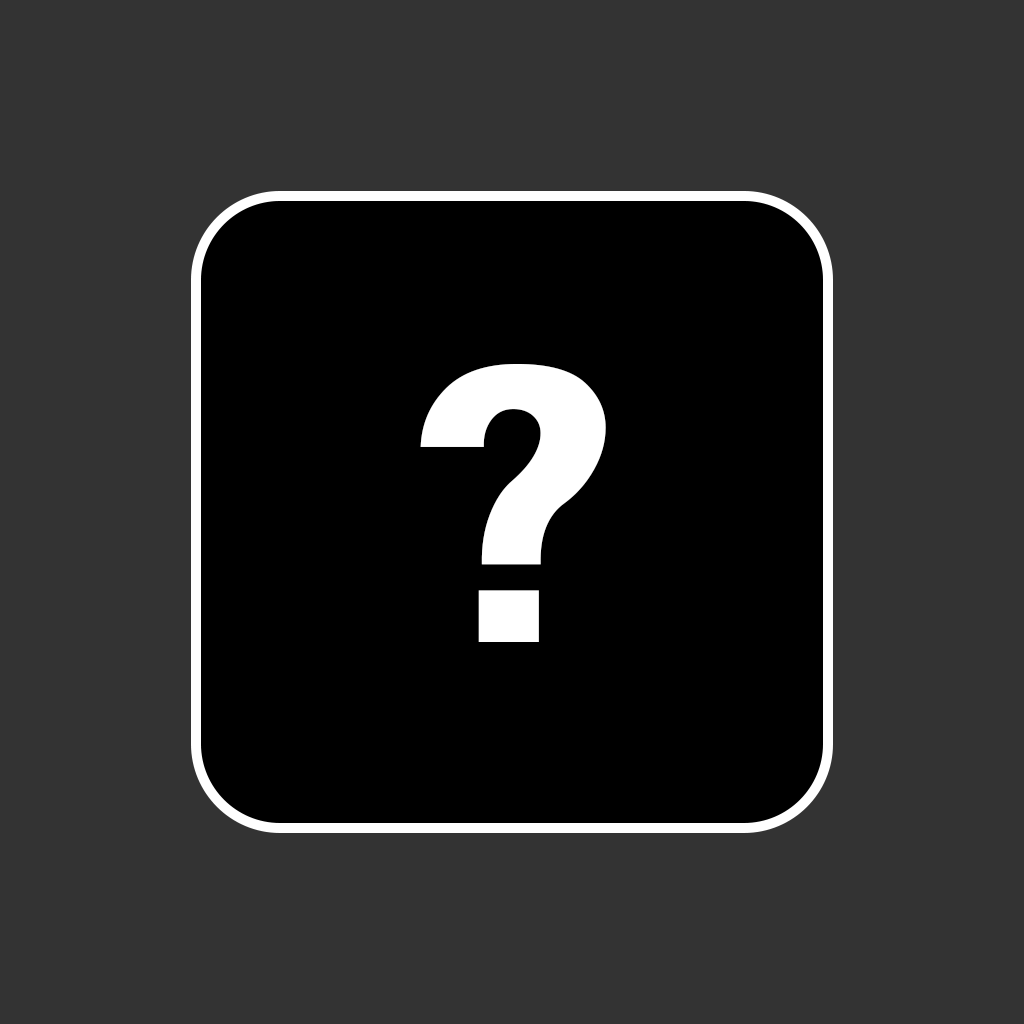
<style>
.page{position:relative;width:1024px;height:1024px;background:#333333}
.page>*{position:absolute;margin:0}
.t1{font:318px "HeadlineR-HM";color:#ffffff}
</style>
<div class="page">
<p class="t1" style="left:420px;top:364px;width:186px;height:278px">?</p>
</div>
